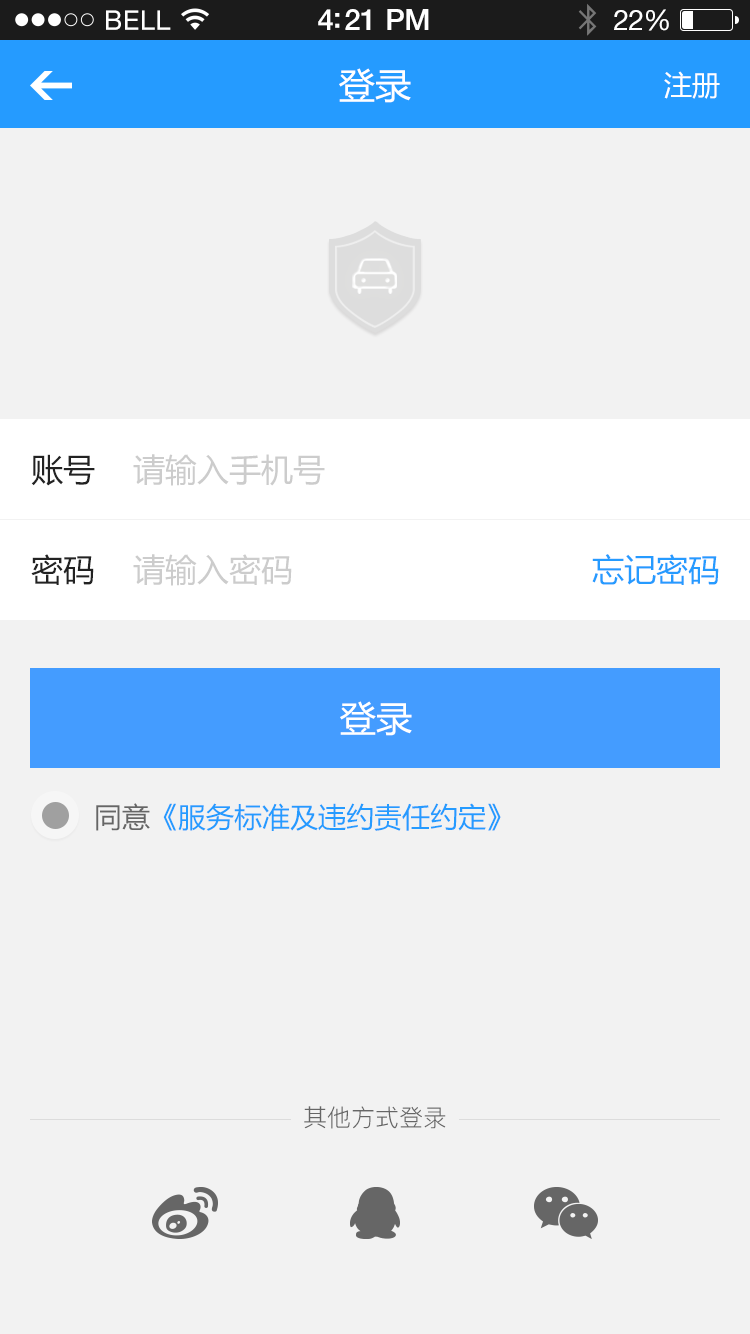
<style>
.page{position:relative;width:750px;height:1334px;background:#f2f2f2}
.page>*{position:absolute;margin:0}
.t1{font:36px "MicrosoftYaHei";color:#ffffff}
.t2{font:28px "MicrosoftYaHei";color:#ffffff}
.t3{font:32px "MicrosoftYaHei";color:#222222}
.t4{font:32px "MicrosoftYaHei";color:#cccccc}
.t5{font:32px "MicrosoftYaHei";color:#259bff}
.t6{font:28px "MicrosoftYaHei";color:#259bff}
.t7{font:28px "MicrosoftYaHei";color:#666666}
.t8{font:24px "PingFang-SC-Regular";color:#666666}
</style>
<div class="page">
<p class="t1" style="left:339px;top:68px;width:72px;height:35px">登录</p>
<p class="t2" style="left:664px;top:71px;width:56px;height:28px">注册</p>
<p class="t3" style="left:31px;top:454px;width:64px;height:32px">账号</p>
<p class="t4" style="left:133px;top:454px;width:192px;height:32px">请输入手机号</p>
<p class="t3" style="left:31px;top:554px;width:63px;height:31px">密码</p>
<p class="t4" style="left:133px;top:554px;width:159px;height:32px">请输入密码</p>
<p class="t5" style="left:592px;top:554px;width:127px;height:31px">忘记密码</p>
<p class="t1" style="left:340px;top:701px;width:72px;height:35px">登录</p>
<p class="t6" style="left:96px;top:803px;width:405px;height:28px"><span class="t7">同意</span>《服务标准及违约责任约定》</p>
<p class="t8" style="left:304px;top:1106px;width:142px;height:23px">其他方式登录</p>
</div>
